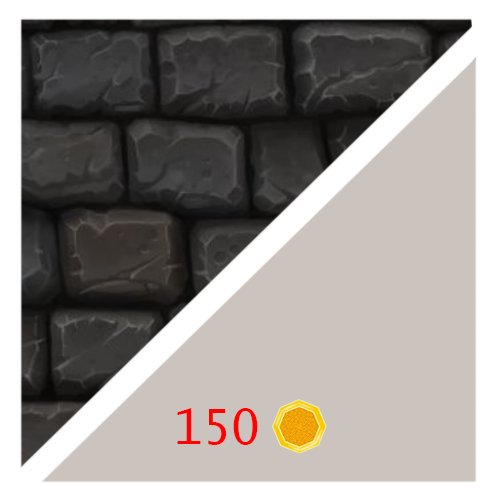
<style>
.page{position:relative;width:500px;height:500px;background:#cac3be}
.page>*{position:absolute;margin:0}
.t1{font:48px "LucidaConsole";color:#ff0101}
</style>
<div class="page">
<p class="t1" style="left:177px;top:408px;width:81px;height:37px">150</p>
</div>
